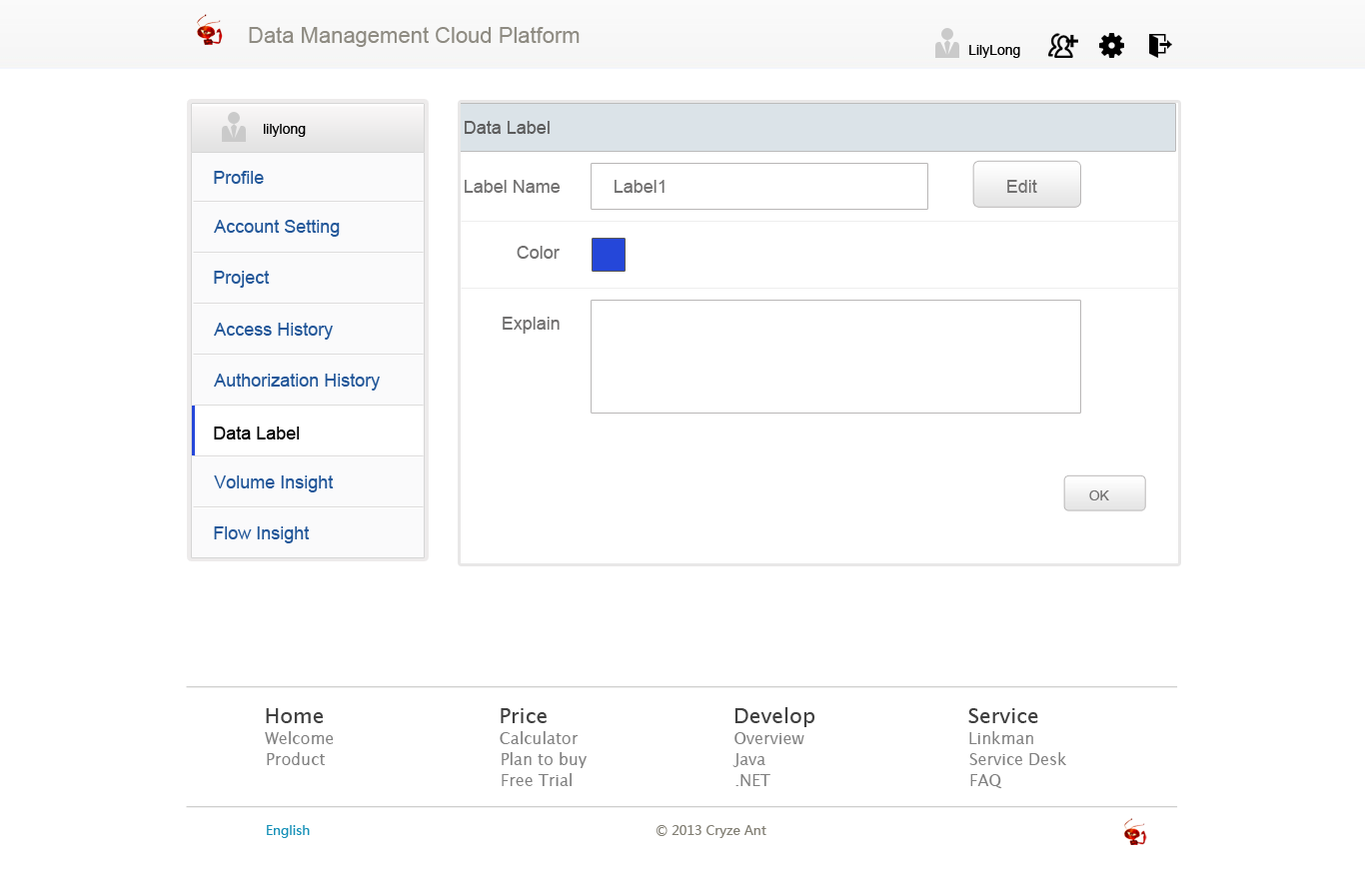
<style>
.page{position:relative;width:1365px;height:873px;background:#ffffff}
.page>*{position:absolute;margin:0}
.t1{font:22px "ArialMT";color:#8e8b82}
.t2{font:14px "ArialMT";color:#000000}
.t3{font:18px "ArialMT";color:#5b5b5b}
.t4{font:18px "ArialMT";color:#225799}
.t5{font:18px "ArialMT";color:#717070}
.t6{font:18px "ArialMT";color:#000000}
.t7{font:13.5px "ArialMT";color:#717070}
.t8{font:21px "LucidaSans";color:#404040}
.t9{font:21px "LucidaSans";color:#3f3f3f}
.t10{font:16px "LucidaSans";color:#818181}
.t11{font:13px "MicrosoftYaHei";color:#1791b8}
.t12{font:13px "MicrosoftYaHei";color:#827f74}
</style>
<div class="page">
<p class="t1" style="left:249px;top:27px;width:331px;height:20px">Data Management Cloud Platform</p>
<p class="t2" style="left:969px;top:45px;width:51px;height:13px">LilyLong</p>
<p class="t2" style="left:264px;top:124px;width:42px;height:13px">lilylong</p>
<p class="t3" style="left:465px;top:121px;width:85px;height:13px">Data Label</p>
<p class="t4" style="left:214px;top:171px;width:50px;height:13px">Profile</p>
<p class="t5" style="left:465px;top:180px;width:96px;height:13px">Label Name</p>
<p class="t5" style="left:615px;top:180px;width:50px;height:13px">Label1</p>
<p class="t5" style="left:1007px;top:180px;width:30px;height:13px">Edit</p>
<p class="t4" style="left:214px;top:220px;width:126px;height:17px">Account Setting</p>
<p class="t5" style="left:517px;top:246px;width:43px;height:13px">Color</p>
<p class="t4" style="left:214px;top:271px;width:56px;height:17px">Project</p>
<p class="t5" style="left:503px;top:317px;width:57px;height:17px">Explain</p>
<p class="t4" style="left:214px;top:323px;width:119px;height:17px">Access History</p>
<p class="t4" style="left:214px;top:374px;width:166px;height:17px">Authorization History</p>
<p class="t6" style="left:214px;top:427px;width:86px;height:13px">Data Label</p>
<p class="t4" style="left:214px;top:476px;width:120px;height:17px">Volume Insight</p>
<p class="t7" style="left:1089px;top:491px;width:20px;height:10px">OK</p>
<p class="t4" style="left:214px;top:527px;width:96px;height:17px">Flow Insight</p>
<p class="t8" style="left:266px;top:709px;width:58px;height:15px">Home</p>
<p class="t9" style="left:501px;top:709px;width:46px;height:15px">Price</p>
<p class="t8" style="left:735px;top:708px;width:81px;height:20px">Develop</p>
<p class="t9" style="left:968px;top:709px;width:70px;height:15px">Service</p>
<p class="t10" style="left:265px;top:732px;width:69px;height:13px">Welcome</p>
<p class="t10" style="left:500px;top:732px;width:79px;height:13px">Calculator</p>
<p class="t10" style="left:735px;top:733px;width:70px;height:12px">Overview</p>
<p class="t10" style="left:969px;top:732px;width:64px;height:13px">Linkman</p>
<p class="t10" style="left:267px;top:753px;width:58px;height:13px">Product</p>
<p class="t10" style="left:502px;top:753px;width:85px;height:16px">Plan to buy</p>
<p class="t10" style="left:733px;top:754px;width:33px;height:14px">Java</p>
<p class="t10" style="left:969px;top:753px;width:97px;height:13px">Service Desk</p>
<p class="t10" style="left:502px;top:774px;width:70px;height:13px">Free Trial</p>
<p class="t10" style="left:736px;top:775px;width:35px;height:12px">.NET</p>
<p class="t10" style="left:970px;top:775px;width:32px;height:15px">FAQ</p>
<p class="t11" style="left:267px;top:825px;width:43px;height:13px">English</p>
<p class="t12" style="left:657px;top:825px;width:110px;height:13px">© 2013 Cryze Ant</p>
</div>
